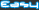
<style>
.page{position:relative;width:39px;height:10px;background:#333333}
.page>*{position:absolute;margin:0}
.t1{font:10px "ThundergodII";color:#ffffff}
</style>
<div class="page">
<p class="t1" style="left:1px;top:1px;width:37px;height:8px">Easy</p>
</div>
